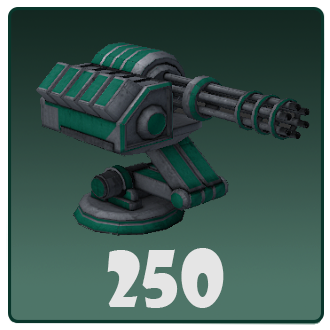
<style>
.page{position:relative;width:330px;height:330px}
.page>*{position:absolute;margin:0}
.t1{font:76.4px "ShowcardGothic-Reg";color:#e5e5e5}
</style>
<div class="page">
<p class="t1" style="left:107px;top:248px;width:117px;height:60px">250</p>
</div>
